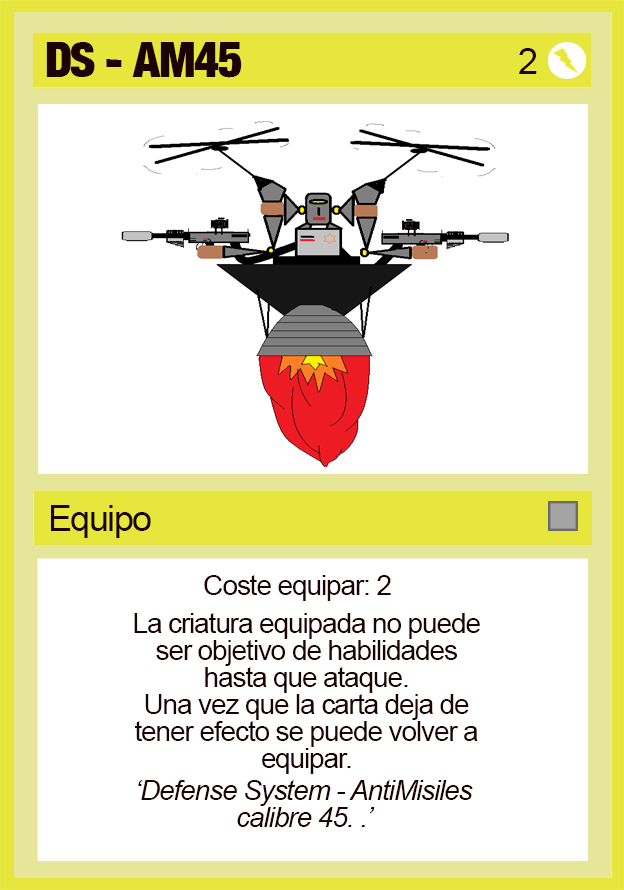
<style>
.page{position:relative;width:624px;height:890px;background:#ffffff}
.page>*{position:absolute;margin:0}
.t1{font:48px "Harvest";letter-spacing:-0.04em;color:#1d0202}
.t2{font:36px "ArialMT";letter-spacing:-0.04em;color:#1d0202}
.t3{font:28px "ArialMT";letter-spacing:-0.04em;color:#1d0202}
.t4{font:28px/27px "ArialMT";letter-spacing:-0.04em;color:#1d0202}
.t5{font:28px "Arial-ItalicMT";letter-spacing:-0.04em;color:#1d0202}
</style>
<div class="page">
<p class="t1" style="left:46px;top:42px;width:196px;height:36px">DS - AM45</p>
<p class="t2" style="left:519px;top:48px;width:18px;height:26px">2</p>
<p class="t2" style="left:51px;top:505px;width:100px;height:33px">Equipo</p>
<p class="t3" style="left:204px;top:575px;width:187px;height:26px">Coste equipar: 2</p>
<p class="t4" style="left:134px;top:613px;width:346px;height:161px;text-align:center">La criatura equipada no puede ser objetivo de habilidades hasta que ataque.                                          Una vez que la carta deja de tener efecto se puede volver a equipar.</p>
<p class="t5" style="left:138px;top:780px;width:335px;height:47px">‘Defense System - AntiMisiles calibre 45. .’</p>
</div>
